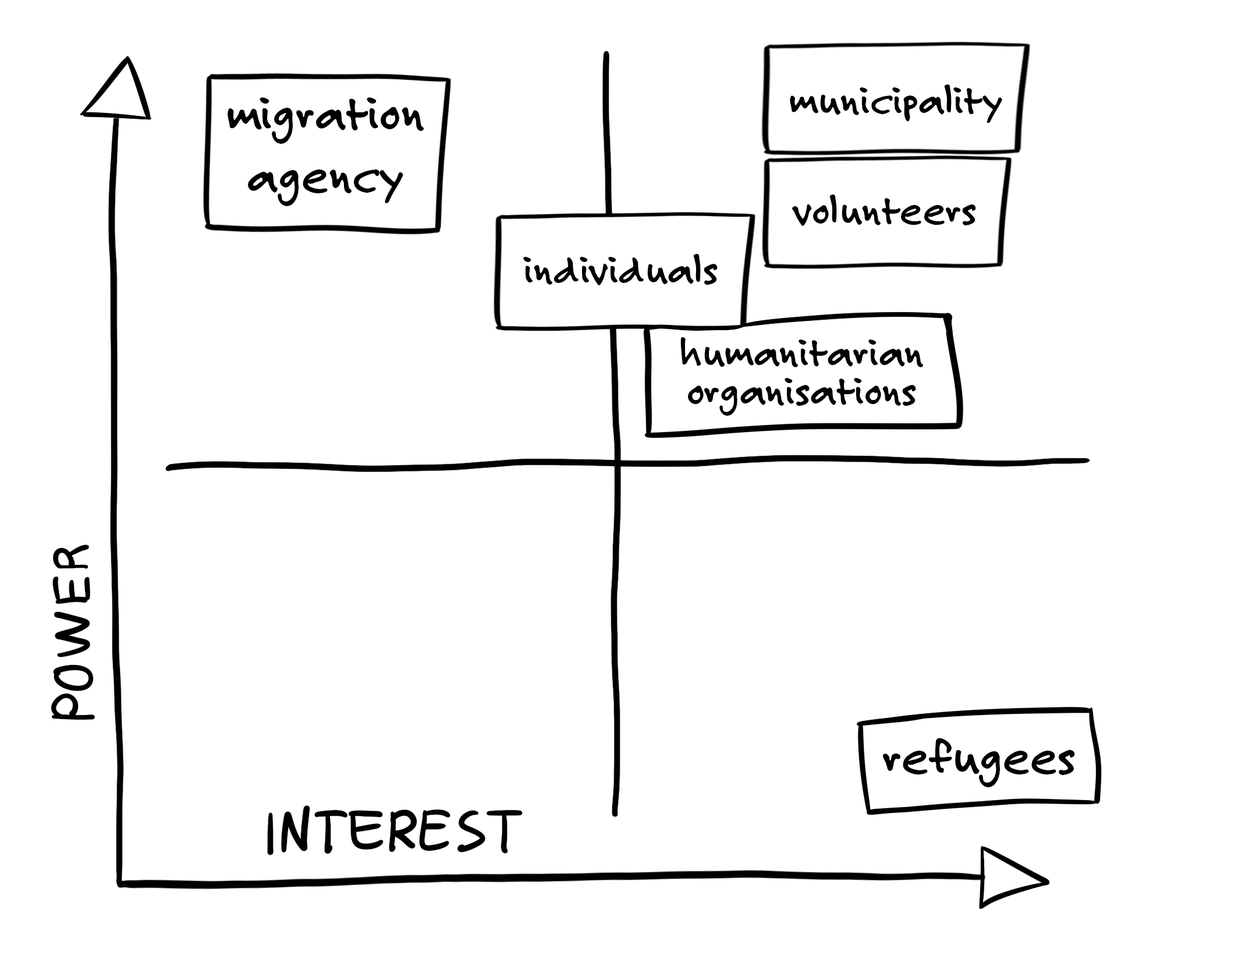
<style>
.page{position:relative;width:1249px;height:955px;background:#ffffff}
.page>*{position:absolute;margin:0}
.t1{font:42.7px "FeltTipRoman-Bold";color:#000000}
.t2{font:51.7px "FeltTipRoman-Bold";color:#000000}
.t3{font:42.7px/38.4px "FeltTipRoman-Bold";color:#000000}
.t4{font:51.2px "FeltTipRoman-Bold";color:#000000}
</style>
<div class="page">
<p class="t1" style="left:790px;top:84px;width:212px;height:39px">municipality</p>
<p class="t2" style="left:228px;top:97px;width:196px;height:109px;text-align:center">migration agency</p>
<p class="t1" style="left:792px;top:194px;width:184px;height:32px">volunteers</p>
<p class="t1" style="left:523px;top:254px;width:195px;height:31px">individuals</p>
<p class="t3" style="left:680px;top:337px;width:243px;height:79px;text-align:center">humanitarian<br>organisations</p>
<p class="t4" style="left:883px;top:737px;width:192px;height:50px">refugees</p>
</div>
